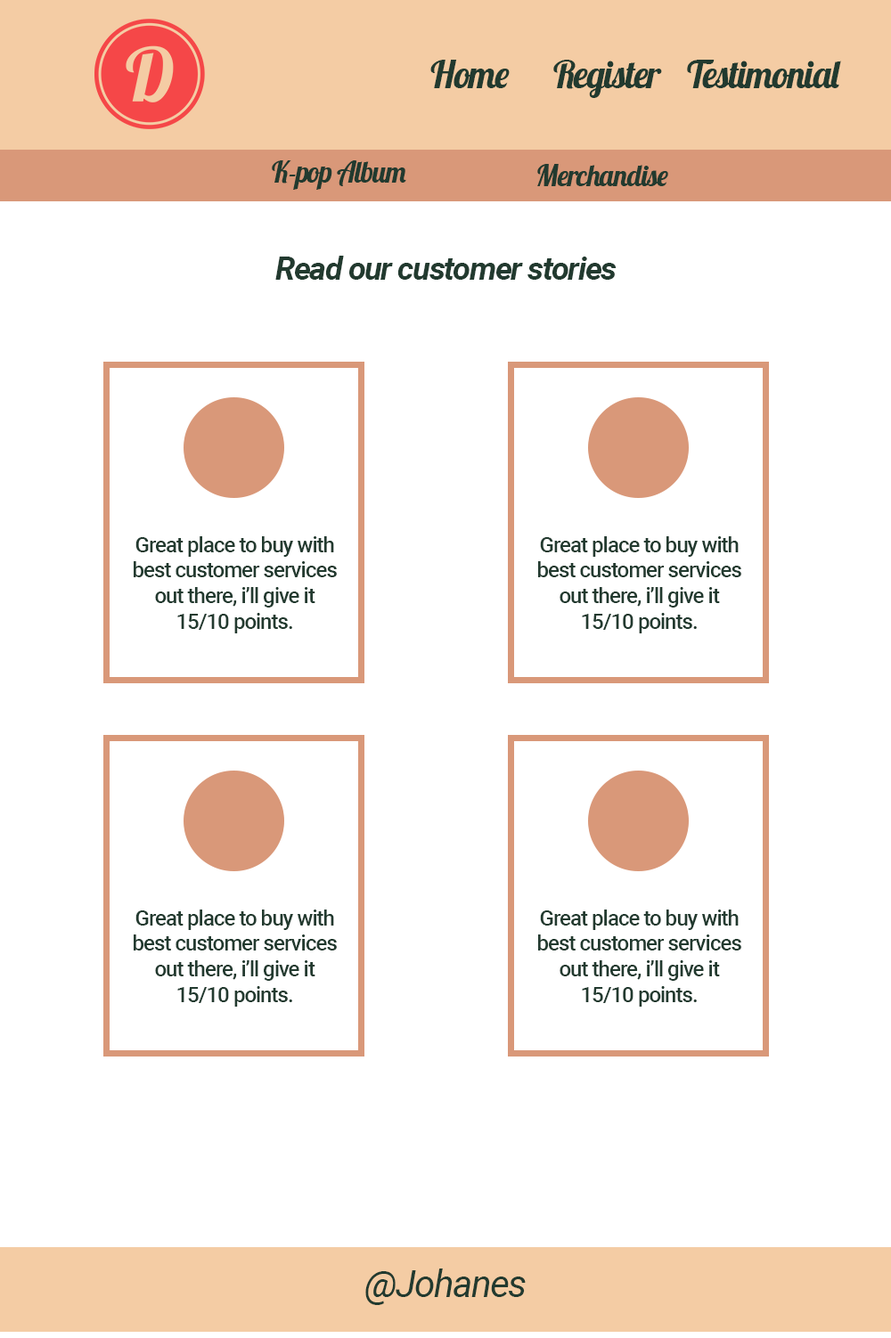
<style>
.page{position:relative;width:891px;height:1338px;background:#ffffff}
.page>*{position:absolute;margin:0}
.t1{font:37.4px "Lobster-Regular";letter-spacing:-0.04em;color:#223a2f}
.t2{font:28.7px "Lobster-Regular";letter-spacing:-0.04em;color:#223a2f}
.t3{font:32.1px "Roboto-BoldItalic";letter-spacing:-0.04em;color:#223a2f}
.t4{font:21.4px "Roboto-Medium";letter-spacing:-0.04em;color:#223a2f}
.t5{font:37.4px "Roboto-Italic";letter-spacing:-0.04em;color:#223a2f}
</style>
<div class="page">
<p class="t1" style="left:430px;top:60px;width:80px;height:28px">Home</p>
<p class="t1" style="left:553px;top:60px;width:109px;height:38px">Register</p>
<p class="t1" style="left:687px;top:60px;width:154px;height:28px">Testimonial</p>
<p class="t2" style="left:272px;top:160px;width:134px;height:30px">K-pop Album</p>
<p class="t2" style="left:537px;top:164px;width:131px;height:22px">Merchandise</p>
<p class="t3" style="left:275px;top:256px;width:342px;height:24px">Read our customer stories</p>
<p class="t4" style="left:134px;top:536px;width:203px;height:98px;text-align:center">Great place to buy with best customer services out there, i’ll give it 15/10 points.</p>
<p class="t4" style="left:538px;top:536px;width:203px;height:98px;text-align:center">Great place to buy with best customer services out there, i’ll give it 15/10 points.</p>
<p class="t4" style="left:134px;top:910px;width:203px;height:97px;text-align:center">Great place to buy with best customer services out there, i’ll give it 15/10 points.</p>
<p class="t4" style="left:538px;top:910px;width:203px;height:97px;text-align:center">Great place to buy with best customer services out there, i’ll give it 15/10 points.</p>
<p class="t5" style="left:365px;top:1269px;width:161px;height:36px">@Johanes</p>
</div>
